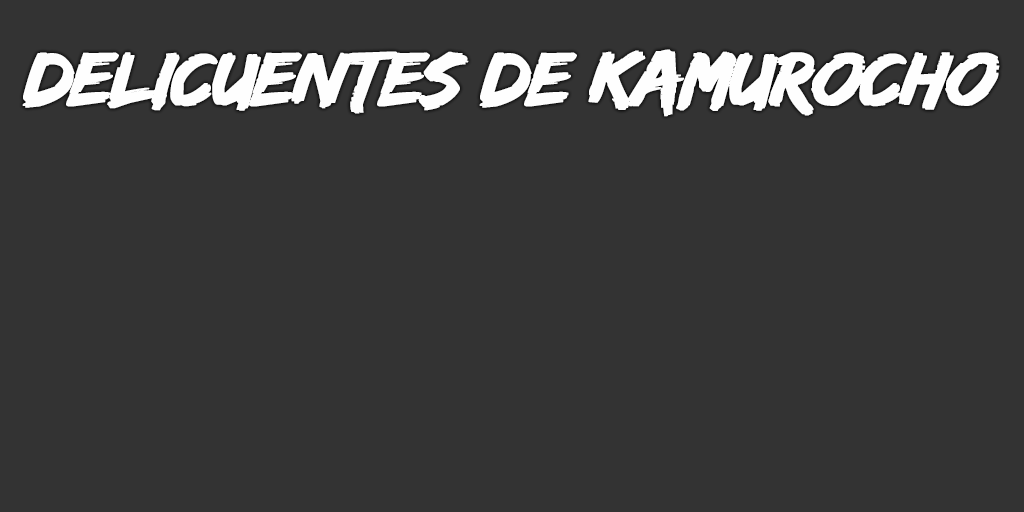
<style>
.page{position:relative;width:1024px;height:512px;background:#333333}
.page>*{position:absolute;margin:0}
.t1{font:79px "EdoSZ";letter-spacing:-0.04em;color:#fefefe;font-weight:bold;font-style:italic;scale:1.05 1}
</style>
<div class="page">
<p class="t1" style="left:22px;top:49px;width:978px;height:68px">delicuentes de kamurocho</p>
</div>
